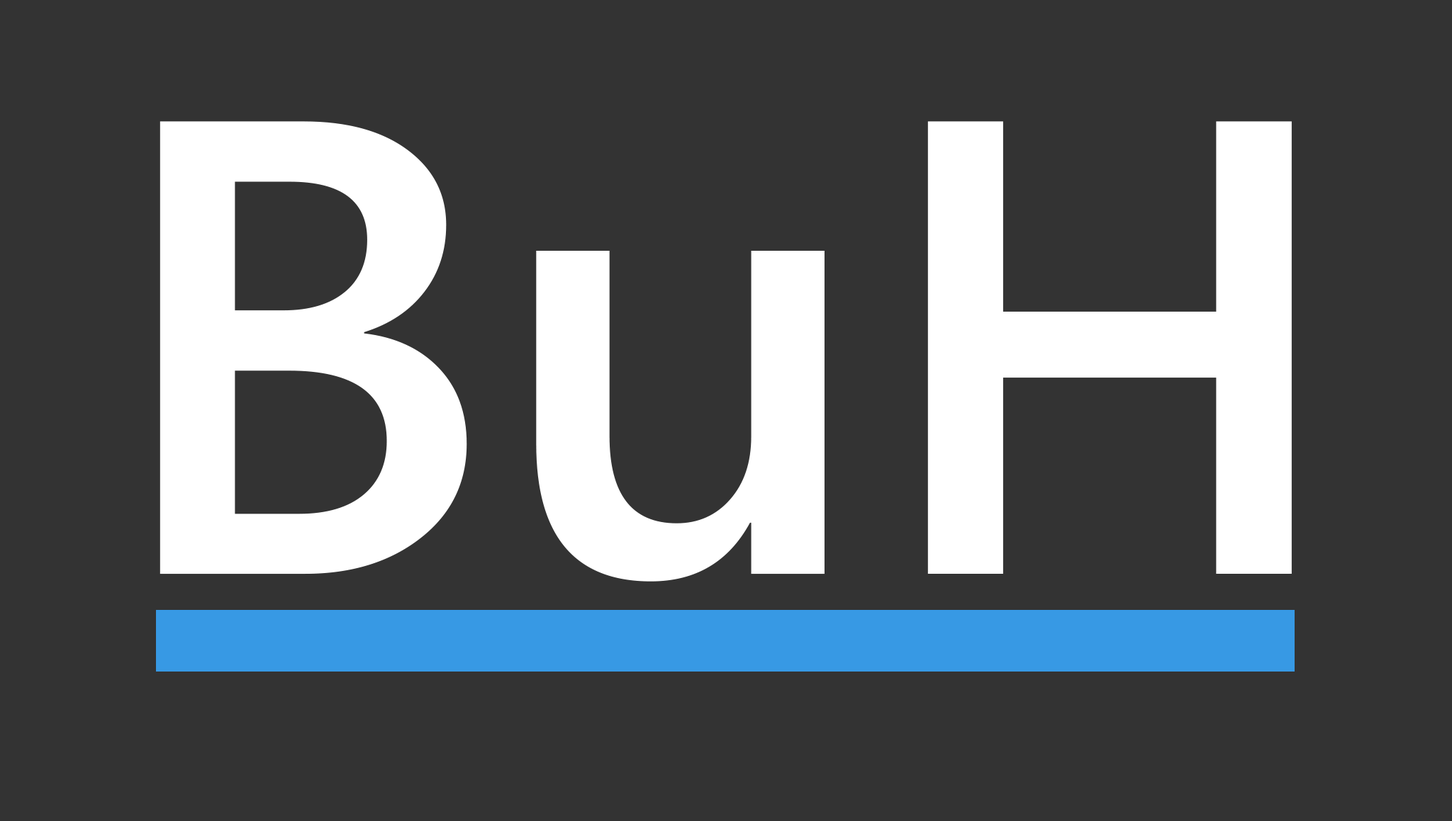
<style>
.page{position:relative;width:1452px;height:821px;background:#333333}
.page>*{position:absolute;margin:0}
.t1{font:646.4px "SegoeUI-Semibold";color:#ffffff}
</style>
<div class="page">
<p class="t1" style="left:159px;top:121px;width:1132px;height:461px">BuH</p>
</div>
